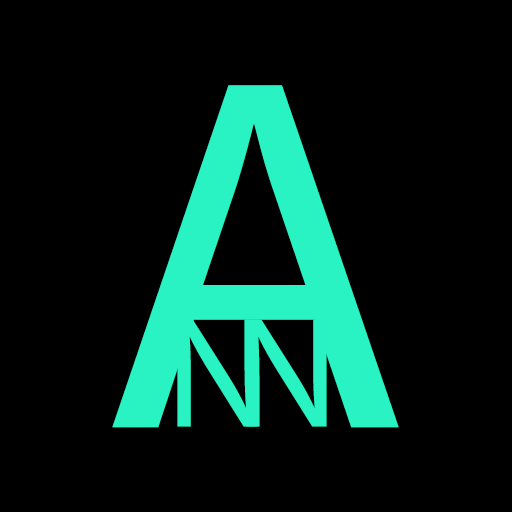
<style>
.page{position:relative;width:512px;height:512px;background:#000000}
.page>*{position:absolute;margin:0}
.t1{font:506.9px "MyriadPro-Regular";color:#29f3c3}
.t2{font:158.1px "MyriadPro-Regular";color:#29f3c3}
</style>
<div class="page">
<p class="t1" style="left:112px;top:85px;width:287px;height:343px">A</p>
<p class="t2" style="left:177px;top:319px;width:81px;height:108px">N</p>
<p class="t2" style="left:246px;top:319px;width:81px;height:108px">N</p>
</div>
